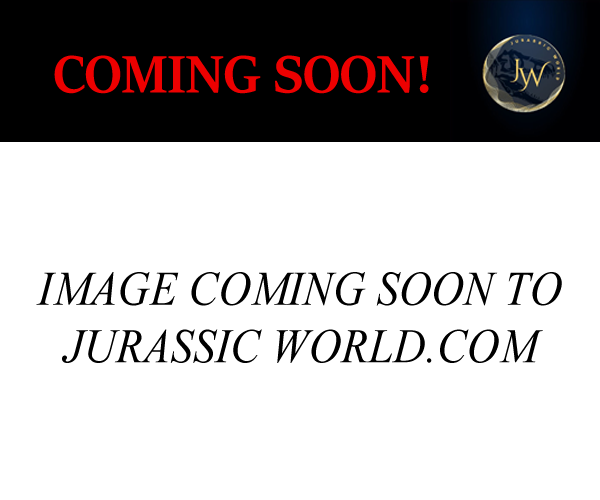
<style>
.page{position:relative;width:600px;height:500px;background:#ffffff}
.page>*{position:absolute;margin:0}
.t1{font:58.9px "SitkaBanner-Bold";color:#ed0000}
.t2{font:48px "TimesNewRomanPS-ItalicMT";color:#000000;scale:0.93 1}
</style>
<div class="page">
<p class="t1" style="left:54px;top:55px;width:375px;height:39px">COMING SOON!</p>
<p class="t2" style="left:36px;top:272px;width:526px;height:91px;text-align:center">IMAGE COMING SOON TO JURASSIC WORLD.COM</p>
</div>
